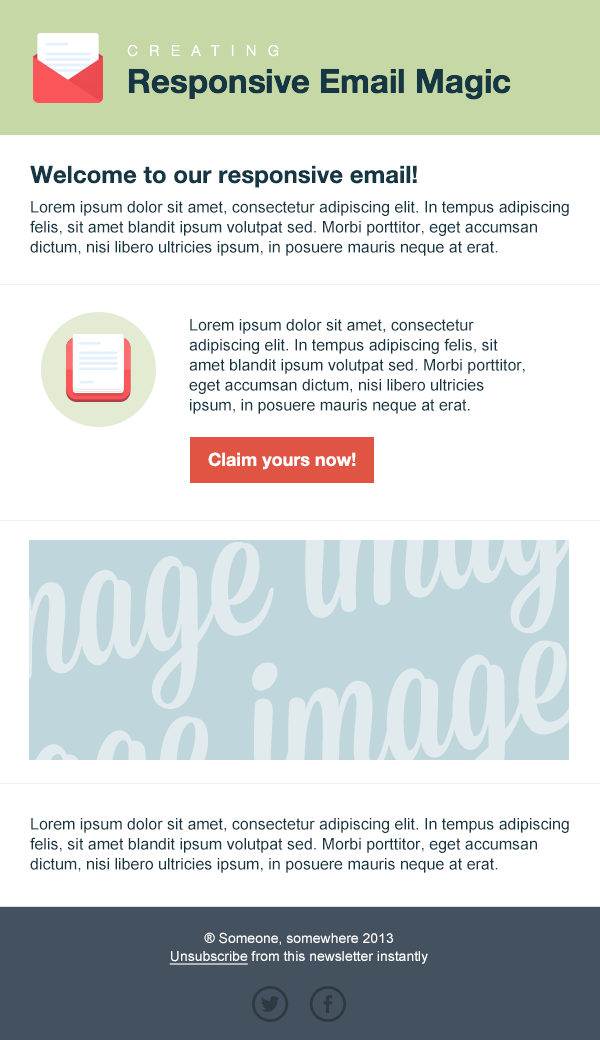
<style>
.page{position:relative;width:600px;height:1040px;background:#ffffff}
.page>*{position:absolute;margin:0}
.t1{font:32.9px/36.6px "HelveticaNeue-Bold";color:#153643}
.t2{font:14.7px/36.6px "HelveticaNeue-Light";letter-spacing:0.8em;color:#ffffff}
.t3{font:24px "HelveticaNeue-Bold";color:#153643}
.t4{font:16px/20px "ArialMT";color:#153643}
.t5{font:18px "HelveticaNeue-Bold";color:#ffffff}
.t6{font:14px/18px "ArialMT";color:#ffffff}
.t7{font:14px/18px "ArialMT";color:#ffffff;text-decoration:underline}
</style>
<div class="page">
<p class="t1" style="left:127px;top:44px;width:384px;height:56px"><span class="t2">CREATING<br></span>Responsive Email Magic</p>
<p class="t3" style="left:30px;top:165px;width:387px;height:23px">Welcome to our responsive email!</p>
<p class="t4" style="left:30px;top:201px;width:539px;height:55px">Lorem ipsum dolor sit amet, consectetur adipiscing elit. In tempus adipiscing felis, sit amet blandit ipsum volutpat sed. Morbi porttitor, eget accumsan dictum, nisi libero ultricies ipsum, in posuere mauris neque at erat.</p>
<p class="t4" style="left:189px;top:319px;width:336px;height:95px">Lorem ipsum dolor sit amet, consectetur adipiscing elit. In tempus adipiscing felis, sit amet blandit ipsum volutpat sed. Morbi porttitor, eget accumsan dictum, nisi libero ultricies ipsum, in posuere mauris neque at erat.</p>
<p class="t5" style="left:208px;top:452px;width:148px;height:18px">Claim yours now!</p>
<p class="t4" style="left:30px;top:818px;width:539px;height:55px">Lorem ipsum dolor sit amet, consectetur adipiscing elit. In tempus adipiscing felis, sit amet blandit ipsum volutpat sed. Morbi porttitor, eget accumsan dictum, nisi libero ultricies ipsum, in posuere mauris neque at erat.</p>
<p class="t6" style="left:169px;top:932px;width:259px;height:33px;text-align:center">® Someone, somewhere 2013<br><span class="t7">Unsubscribe</span> from this newsletter instantly</p>
</div>
